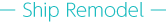
<style>
.page{position:relative;width:166px;height:22px;background:#ffffff}
.page>*{position:absolute;margin:0}
.t1{font:18px "UDShinGoPro-Light";color:#1dbcc0}
</style>
<div class="page">
<p class="t1" style="left:0px;top:2px;width:167px;height:20px">ー Ship Remodel ー</p>
</div>
